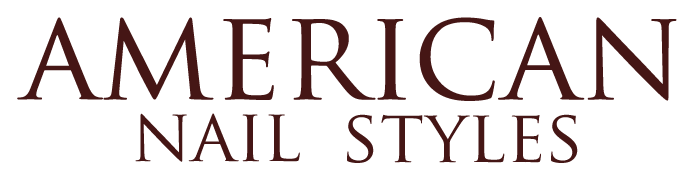
<style>
.page{position:relative;width:699px;height:175px;background:#ffffff}
.page>*{position:absolute;margin:0}
.t1{font:125px "TrajanPro-Regular";color:#451615}
.t2{font:124.2px "TrajanPro-Regular";color:#451615}
.t3{font:72.5px "TrajanPro-Regular";color:#451615}
</style>
<div class="page">
<p class="t1" style="left:17px;top:17px;width:660px;height:84px"><span class="t2">a</span>merican</p>
<p class="t3" style="left:135px;top:113px;width:165px;height:49px">nail</p>
<p class="t3" style="left:347px;top:114px;width:231px;height:49px">styles</p>
</div>
